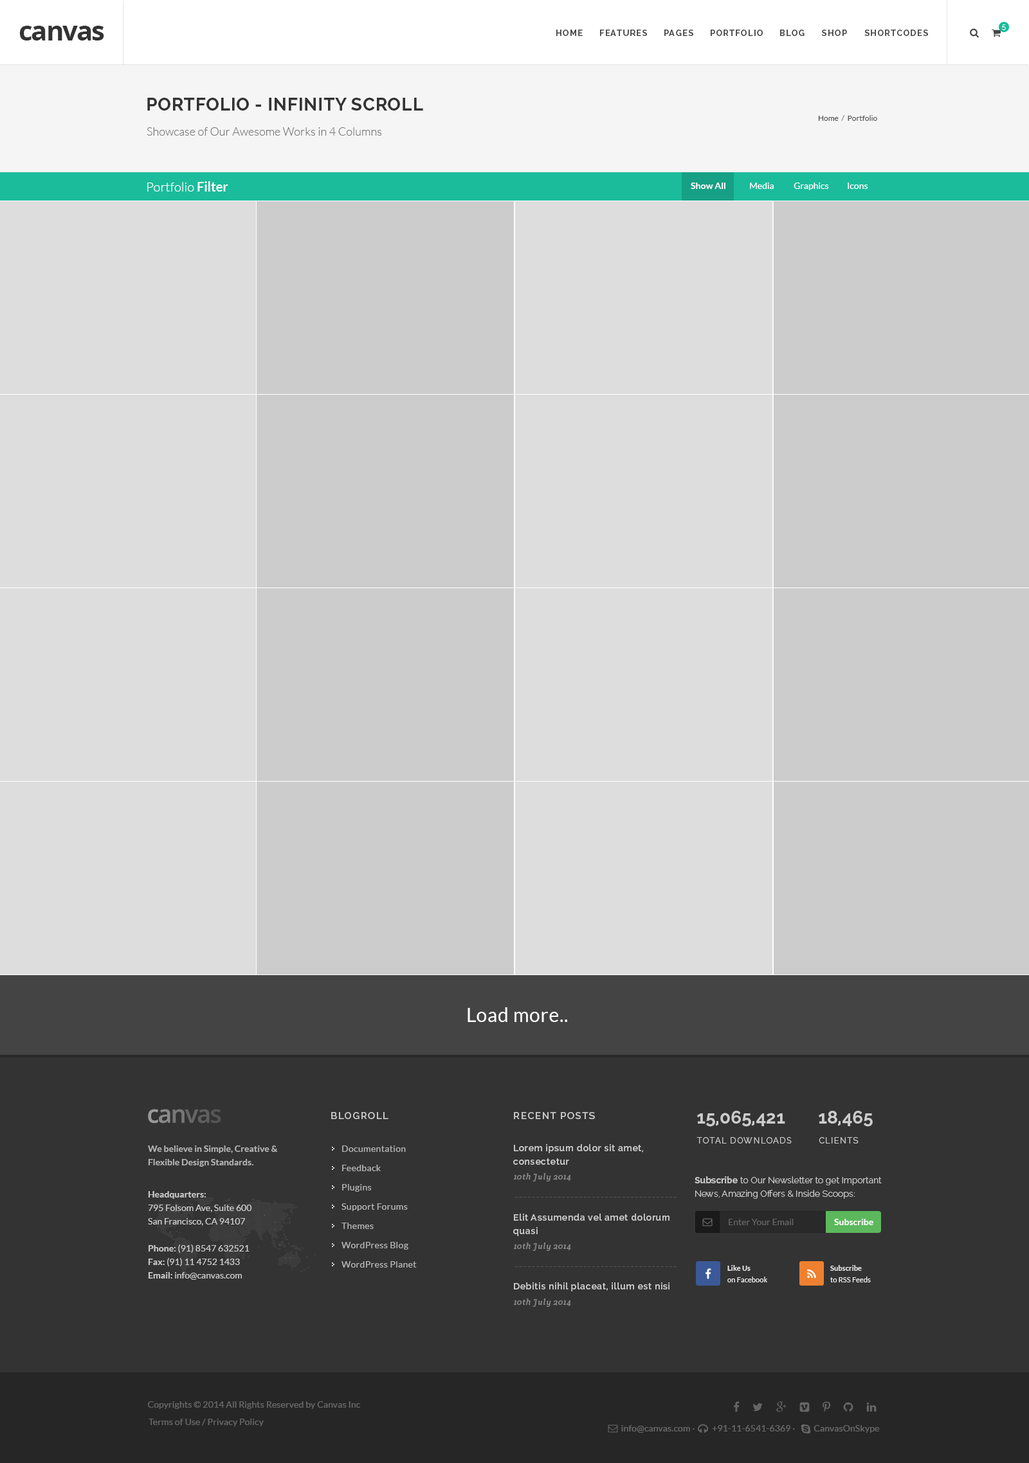
<style>
.page{position:relative;width:1029px;height:1463px;background:#dddddd}
.page>*{position:absolute;margin:0}
.t1{font:27px "OpenSans-Bold";letter-spacing:-0.05em;color:#333333}
.t2{font:8.4px "Raleway-Bold";letter-spacing:0.1em;color:#444444}
.t3{font:7.1px "Raleway-Light";letter-spacing:0.1em;color:#ffffff}
.t4{font:18px "Raleway-Bold";letter-spacing:0.025em;color:#333333;text-transform:uppercase}
.t5{font:7.7px "Lato-Regular";color:#555555}
.t6{font:7.7px "Lato-Regular";color:#777777}
.t7{font:11.6px "Lato-Light";color:#777777}
.t8{font:12.9px "Lato-Light";color:#ffffff}
.t9{font:12.9px "Lato-Bold";color:#ffffff}
.t10{font:9px "Lato-Regular";color:#ffffff}
.t11{font:9px "Lato-Bold";color:#ffffff}
.t12{font:19.3px "Lato-Regular";letter-spacing:0.025em;color:#ffffff}
.t13{font:9.6px "Raleway-SemiBold";letter-spacing:0.1em;color:#cccccc}
.t14{font:18px "Raleway-Bold";color:#cccccc}
.t15{font:9px/13.5px "Lato-Bold";color:#cccccc}
.t16{font:9px/19.3px "Lato-Regular";letter-spacing:0.025em;color:#cccccc}
.t17{font:9px/13.5px "Raleway-SemiBold";letter-spacing:0.05em;color:#cccccc}
.t18{font:8.4px "Raleway-Regular";letter-spacing:0.1em;color:#cacaca;text-transform:uppercase}
.t19{font:8.4px "CreteRound-Italic";letter-spacing:0.05em;color:#888888}
.t20{font:9px/13.5px "Raleway-Light";color:#cccccc}
.t21{font:9px/13.5px "Raleway-Bold";color:#cccccc}
.t22{font:9px/13.5px "Lato-Regular";color:#cccccc}
.t23{font:11.6px "Lato-Italic";letter-spacing:0.05em;color:#545454}
.t24{font:9px "Lato-Regular";color:#777777}
.t25{font:7.1px/11.6px "Lato-Regular";letter-spacing:0.01em;color:#eeeeee}
.t26{font:7.1px/11.6px "Lato-Bold";letter-spacing:0.01em;color:#eeeeee}
.t27{font:9px "Raleway-SemiBold";letter-spacing:0.05em;color:#cccccc}
.t28{font:9px "Lato-Regular";letter-spacing:0.01em;color:#666666}
</style>
<div class="page">
<p class="t1" style="left:19px;top:26px;width:85px;height:14px">canvas</p>
<p class="t2" style="left:556px;top:30px;width:26px;height:6px">HOME</p>
<p class="t2" style="left:600px;top:30px;width:47px;height:6px">FEATURES</p>
<p class="t2" style="left:664px;top:30px;width:29px;height:6px">PAGES</p>
<p class="t2" style="left:710px;top:30px;width:52px;height:6px">PORTFOLIO</p>
<p class="t2" style="left:780px;top:30px;width:24px;height:6px">BLOG</p>
<p class="t2" style="left:822px;top:30px;width:25px;height:6px">SHOP</p>
<p class="t2" style="left:864px;top:30px;width:64px;height:6px">SHORTCODES</p>
<p class="t3" style="left:1002px;top:24px;width:3px;height:6px">5</p>
<p class="t4" style="left:147px;top:98px;width:276px;height:13px">Portfolio - infinity scroll</p>
<p class="t5" style="left:818px;top:115px;width:59px;height:6px">Home  <span class="t6">/ </span> Portfolio</p>
<p class="t7" style="left:147px;top:127px;width:235px;height:9px">Showcase of Our Awesome Works in 4 Columns</p>
<p class="t8" style="left:147px;top:181px;width:81px;height:11px">Portfolio <span class="t9">Filter</span></p>
<p class="t10" style="left:690px;top:183px;width:178px;height:7px"><span class="t11">Show All</span>        Media       Graphics           Icons</p>
<p class="t12" style="left:467px;top:1007px;width:100px;height:15px">Load more..</p>
<p class="t13" style="left:331px;top:1112px;width:57px;height:7px">BLOGROLL</p>
<p class="t13" style="left:514px;top:1112px;width:81px;height:7px">RECENT POSTS</p>
<p class="t14" style="left:697px;top:1111px;width:88px;height:16px">15,065,421</p>
<p class="t14" style="left:818px;top:1111px;width:54px;height:16px">18,465</p>
<p class="t15" style="left:148px;top:1146px;width:130px;height:21px;opacity:0.8">We believe in Simple, Creative &amp;<br>Flexible Design Standards.</p>
<p class="t16" style="left:341px;top:1146px;width:76px;height:122px;opacity:0.8">Documentation<br>Feedback<br>Plugins<br>Support Forums<br>Themes<br>WordPress Blog<br>WordPress Planet</p>
<p class="t17" style="left:513px;top:1144px;width:130px;height:21px">Lorem ipsum dolor sit amet,<br>consectetur</p>
<p class="t18" style="left:696px;top:1137px;width:95px;height:7px">TOTAL Downloads</p>
<p class="t18" style="left:818px;top:1137px;width:40px;height:7px">CLIENTS</p>
<p class="t19" style="left:513px;top:1173px;width:58px;height:9px">10th July 2014</p>
<p class="t20" style="left:694px;top:1176px;width:187px;height:23px"><span class="t21">Subscribe</span> to Our Newsletter to get Important<br>News, Amazing Offers &amp; Inside Scoops:</p>
<p class="t22" style="left:148px;top:1191px;width:104px;height:89px"><span class="t15">Headquarters:<br></span>795 Folsom Ave, Suite 600<br>San Francisco, CA 94107<br><span class="t15"><br>Phone: </span>(91) 8547 632521<br><span class="t15">Fax: </span>(91) 11 4752 1433<br><span class="t15">Email: </span>info@canvas.com</p>
<p class="t23" style="left:514px;top:1197px;width:162px;height:1px">--------------------------------------</p>
<p class="t17" style="left:513px;top:1214px;width:156px;height:22px">Elit Assumenda vel amet dolorum<br>quasi</p>
<p class="t24" style="left:728px;top:1219px;width:65px;height:6px;opacity:0.7">Enter Your Email</p>
<p class="t11" style="left:834px;top:1219px;width:39px;height:6px">Subscribe</p>
<p class="t19" style="left:513px;top:1243px;width:58px;height:8px">10th July 2014</p>
<p class="t25" style="left:727px;top:1265px;width:40px;height:17px"><span class="t26">Like Us<br></span>on Facebook</p>
<p class="t25" style="left:830px;top:1265px;width:40px;height:17px"><span class="t26">Subscribe<br></span>to RSS Feeds</p>
<p class="t23" style="left:514px;top:1266px;width:162px;height:1px">--------------------------------------</p>
<p class="t27" style="left:514px;top:1282px;width:155px;height:10px">Debitis nihil placeat, illum est nisi</p>
<p class="t19" style="left:513px;top:1299px;width:58px;height:8px">10th July 2014</p>
<p class="t28" style="left:148px;top:1401px;width:212px;height:8px">Copyrights © 2014 All Rights Reserved by Canvas Inc</p>
<p class="t28" style="left:148px;top:1419px;width:116px;height:7px">Terms of Use / Privacy Policy</p>
<p class="t28" style="left:621px;top:1425px;width:258px;height:8px">info@canvas.com ·   +91-11-6541-6369 ·        CanvasOnSkype</p>
</div>
